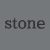
<style>
.page{position:relative;width:50px;height:50px;background:#74787a}
.page>*{position:absolute;margin:0}
.t1{font:16px "SawarabiMincho-Medium";color:#323433}
</style>
<div class="page">
<p class="t1" style="left:5px;top:17px;width:40px;height:12px">stone</p>
</div>
